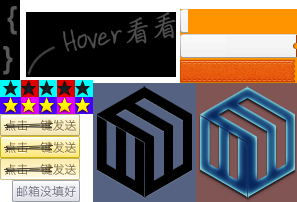
<style>
.page{position:relative;width:297px;height:202px;background:#000000}
.page>*{position:absolute;margin:0}
.t1{font:30px "ArdleysHand-Plain";color:#4e4e4e}
.t2{font:30px "HYi2gj";letter-spacing:-0.1em;color:#4e4e4e;font-weight:bold}
.t3{font:12px "HiraginoSansGB-W3";color:#796125}
.t4{font:12px "HiraginoSansGB-W3";color:#656678}
</style>
<div class="page">
<p class="t1" style="left:62px;top:12px;width:114px;height:40px;rotate:-10deg">Hover<span class="t2">看看</span></p>
<p class="t3" style="left:5px;top:119px;width:71px;height:12px">点击一键发送</p>
<p class="t3" style="left:5px;top:141px;width:71px;height:12px">点击一键发送</p>
<p class="t3" style="left:5px;top:163px;width:71px;height:12px">点击一键发送</p>
<p class="t4" style="left:17px;top:185px;width:59px;height:12px">邮箱没填好</p>
</div>
